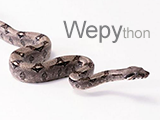
<style>
.page{position:relative;width:160px;height:120px}
.page>*{position:absolute;margin:0}
.t1{font:24px "ArialMT";letter-spacing:-0.02em;color:#7f7f81}
.t2{font:15px "ArialMT";letter-spacing:-0.02em;color:#a1a19d}
</style>
<div class="page">
<p class="t1" style="left:63px;top:20px;width:87px;height:23px">Wepy<span class="t2">thon</span></p>
</div>
